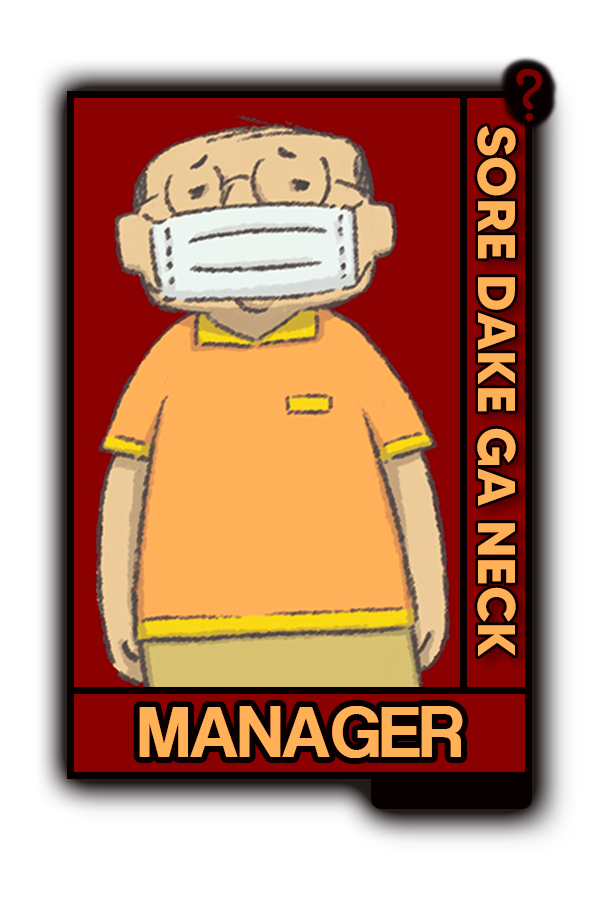
<style>
.page{position:relative;width:600px;height:900px;background:#ffffff}
.page>*{position:absolute;margin:0}
.t1{font:52.7px "MADETOMMY-Bold";color:#ffb158}
.t2{font:75px "CoolveticaRg-Regular";color:#ffb158}
</style>
<div class="page">
<p class="t1" style="left:477px;top:126px;width:39px;height:531px;rotate:90deg">SORE DAKE GA NECK</p>
<p class="t2" style="left:139px;top:706px;width:324px;height:52px">MANAGER</p>
</div>
